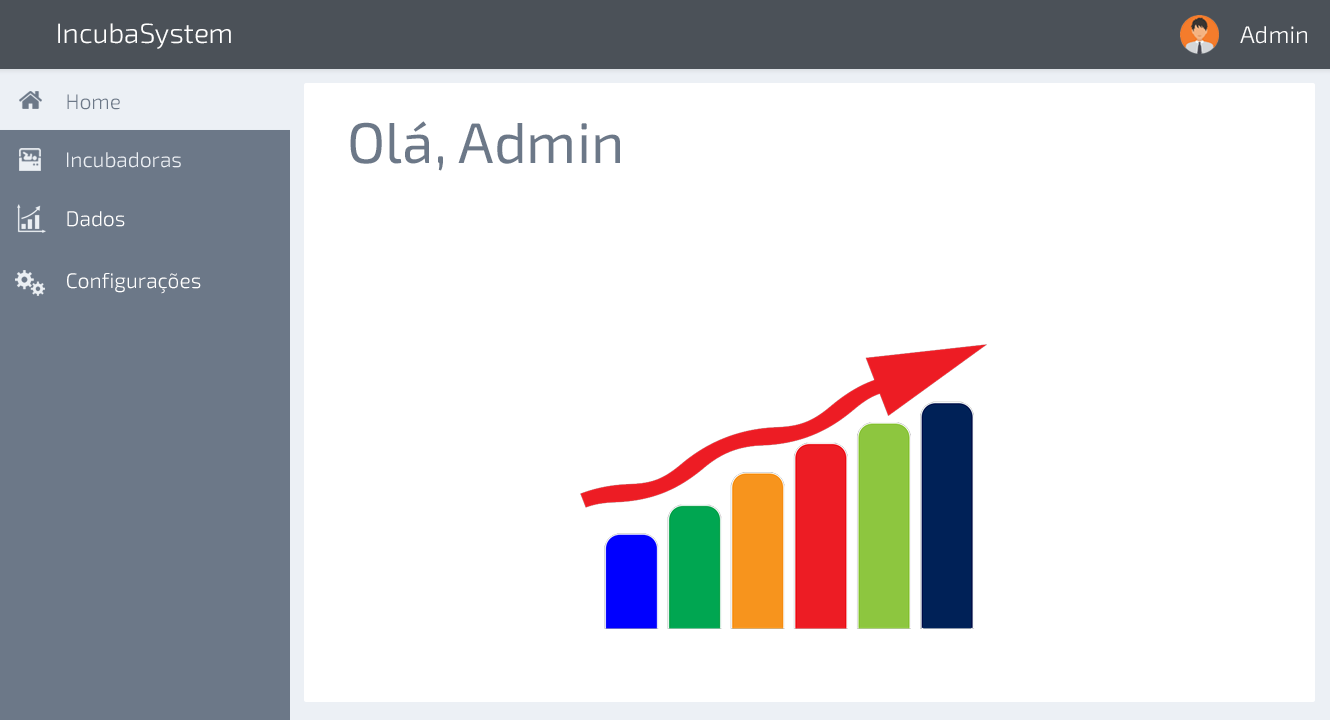
<style>
.page{position:relative;width:1330px;height:720px;background:#ffffff}
.page>*{position:absolute;margin:0}
.t1{font:28px "Exo2-Light";color:#ffffff}
.t2{font:24px "Exo2-Light";color:#ffffff}
.t3{font:21px "Exo2-Light";color:#6c7888}
.t4{font:57.1px "Exo2-Regular";color:#6c7888}
.t5{font:21px "Exo2-Light";color:#ecf0f5}
.t6{font:21px "Exo2-Light";color:#ffffff}
</style>
<div class="page">
<p class="t1" style="left:58px;top:23px;width:173px;height:26px">IncubaSystem</p>
<p class="t2" style="left:1240px;top:26px;width:67px;height:18px">Admin</p>
<p class="t3" style="left:67px;top:94px;width:53px;height:16px">Home</p>
<p class="t4" style="left:350px;top:121px;width:270px;height:50px">Olá, Admin</p>
<p class="t5" style="left:67px;top:152px;width:114px;height:16px">Incubadoras</p>
<p class="t6" style="left:67px;top:211px;width:58px;height:16px">Dados</p>
<p class="t6" style="left:67px;top:273px;width:134px;height:21px">Configurações</p>
</div>
